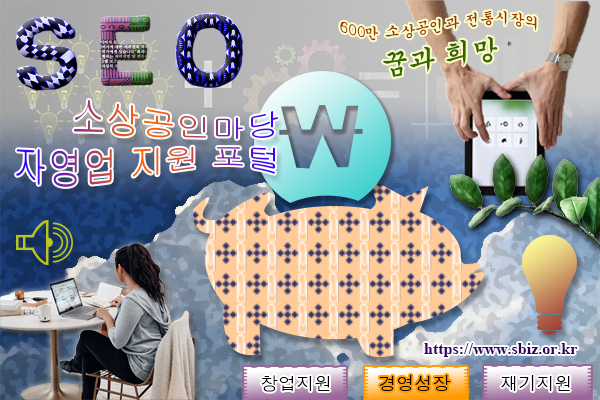
<style>
.page{position:relative;width:600px;height:400px}
.page>*{position:absolute;margin:0}
.t1{font:15px "Gungsuh";color:#993300}
.t2{font:27px "Gungsuh";color:#336600}
.t3{font:35px/40px "Gulim"}
.t4{font:16px "TimesNewRomanPS-BoldMT";color:#330066}
.t5{font:18px "Dotum";color:#000000}
</style>
<div class="page">
<p class="t1" style="left:340px;top:10px;width:197px;height:68px;text-align:center">600만 소상공인과 전통시장의<br><span class="t2">꿈과 희망</span></p>
<p class="t3" style="left:16px;top:100px;width:262px;height:87px;text-align:right">소상공인마당<br>자영업 지원 포털</p>
<p class="t4" style="left:424px;top:343px;width:154px;height:14px">https://www.sbiz.or.kr</p>
<p class="t5" style="left:261px;top:375px;width:309px;height:17px">창업지원                            재기지원</p>
<p class="t5" style="left:379px;top:375px;width:72px;height:16px">경영성장</p>
</div>
